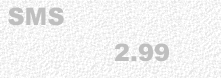
<style>
.page{position:relative;width:221px;height:78px;background:#f7f7f7}
.page>*{position:absolute;margin:0}
.t1{font:24px "Arial-Black";color:#bfbfbf}
</style>
<div class="page">
<p class="t1" style="left:8px;top:7px;width:56px;height:19px">SMS</p>
<p class="t1" style="left:114px;top:43px;width:55px;height:19px">2.99</p>
</div>
